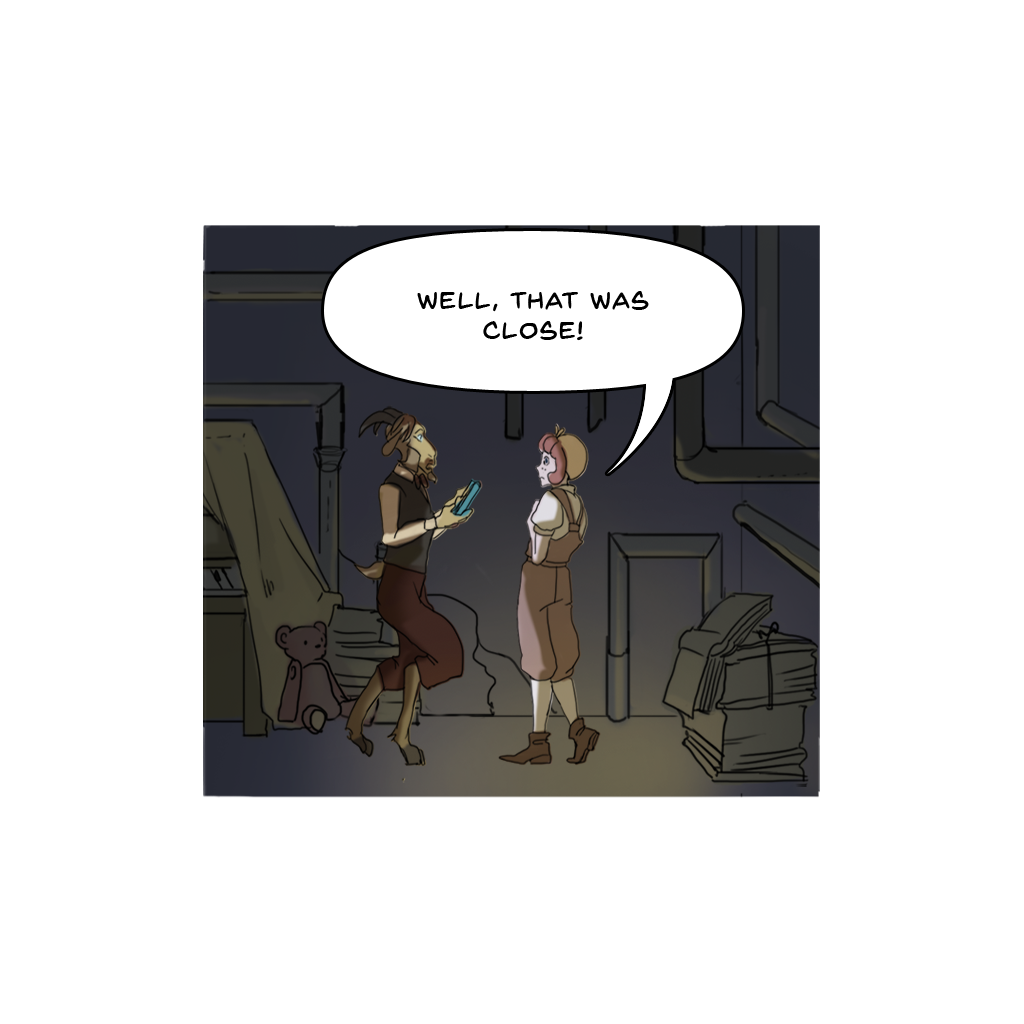
<style>
.page{position:relative;width:1024px;height:1024px;background:#ffffff}
.page>*{position:absolute;margin:0}
.t1{font:25px "BackIssuesBB";letter-spacing:0.05em;color:#000000}
</style>
<div class="page">
<p class="t1" style="left:417px;top:291px;width:232px;height:50px;text-align:center">Well, that was close!</p>
</div>
